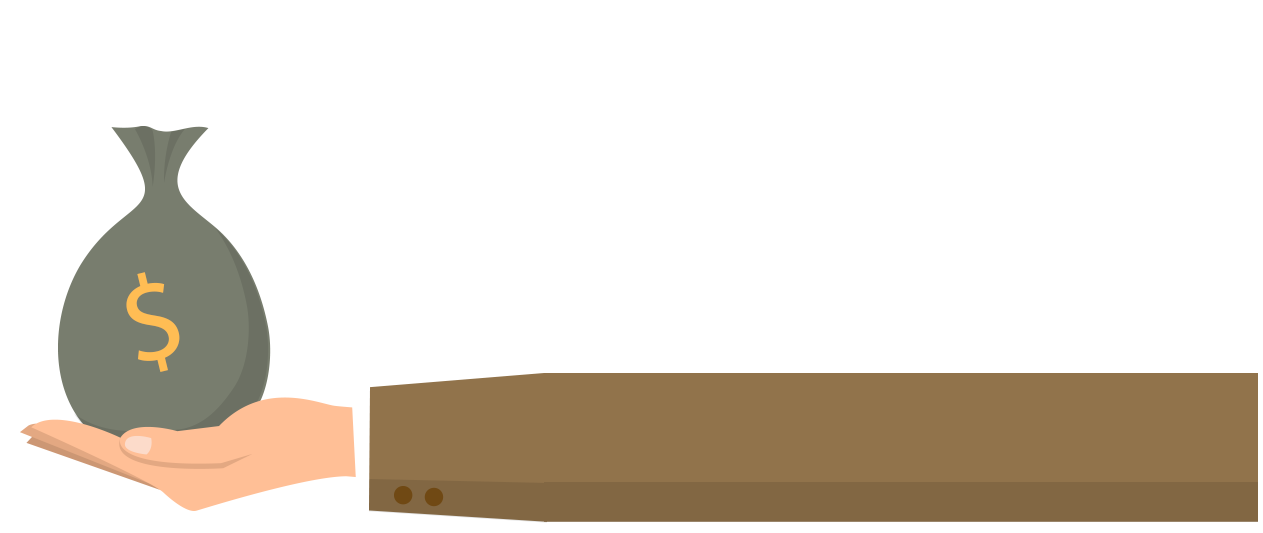
<style>
.page{position:relative;width:1263px;height:533px;background:#ffffff}
.page>*{position:absolute;margin:0}
.t1{font:122.4px "LeckerliOne";color:#ffbd54}
</style>
<div class="page">
<p class="t1" style="left:126px;top:272px;width:54px;height:100px">$</p>
</div>
